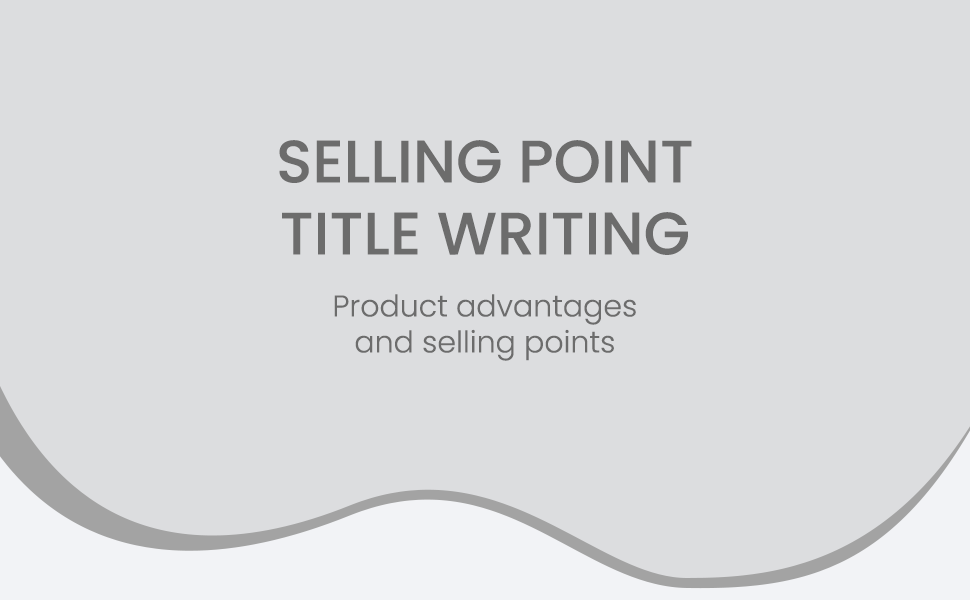
<style>
.page{position:relative;width:970px;height:600px;background:#dcdddf}
.page>*{position:absolute;margin:0}
.t1{font:60px "Poppins-Medium";color:#6c6c6c;text-transform:uppercase}
.t2{font:30px "Poppins-Light";color:#6c6c6c}
</style>
<div class="page">
<p class="t1" style="left:279px;top:140px;width:413px;height:115px;text-align:center">Selling point<br>title writing</p>
<p class="t2" style="left:334px;top:294px;width:302px;height:67px;text-align:center">Product advantages<br>and selling points</p>
</div>
